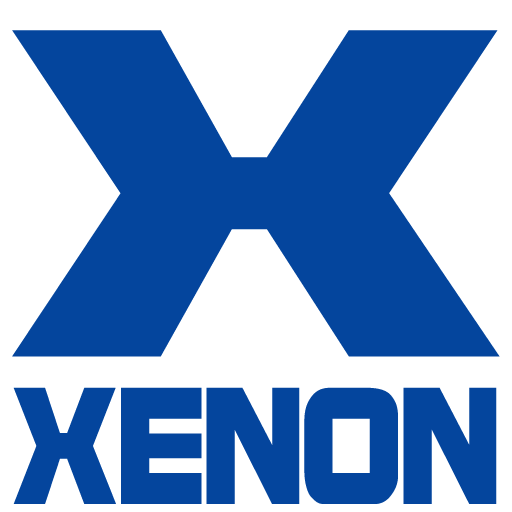
<style>
.page{position:relative;width:512px;height:512px;background:#04459d}
.page>*{position:absolute;margin:0}
.t1{font:498.5px "BolsterBold";letter-spacing:-0.025em;color:#04459d;scale:1.36 1}
.t2{font:177.4px "BolsterBold";letter-spacing:-0.025em;color:#04459d;scale:0.8 1}
</style>
<div class="page">
<p class="t1" style="left:12px;top:30px;width:488px;height:327px">X</p>
<p class="t2" style="left:13px;top:387px;width:484px;height:117px">XENON</p>
</div>
